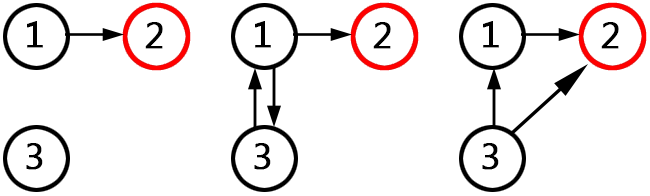
<style>
.page{position:relative;width:650px;height:196px;background:#ffffff}
.page>*{position:absolute;margin:0}
.t1{font:37px "MicrosoftTaiLe";color:#000000;font-weight:bold}
</style>
<div class="page">
<p class="t1" style="left:27px;top:21px;width:16px;height:27px">1</p>
<p class="t1" style="left:145px;top:22px;width:18px;height:27px">2</p>
<p class="t1" style="left:255px;top:21px;width:16px;height:27px">1</p>
<p class="t1" style="left:373px;top:22px;width:18px;height:27px">2</p>
<p class="t1" style="left:483px;top:21px;width:16px;height:27px">1</p>
<p class="t1" style="left:601px;top:22px;width:18px;height:27px">2</p>
<p class="t1" style="left:26px;top:143px;width:17px;height:27px">3</p>
<p class="t1" style="left:254px;top:143px;width:17px;height:27px">3</p>
<p class="t1" style="left:482px;top:143px;width:17px;height:27px">3</p>
</div>
